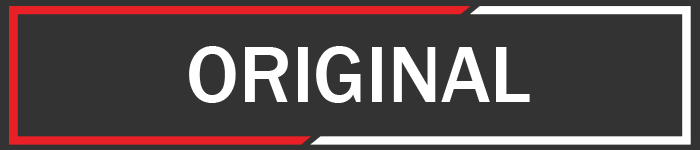
<style>
.page{position:relative;width:700px;height:150px;background:#333333}
.page>*{position:absolute;margin:0}
.t1{font:81.9px "FranklinGothic-Medium";color:#ffffff}
</style>
<div class="page">
<p class="t1" style="left:189px;top:46px;width:341px;height:57px">ORIGINAL</p>
</div>
